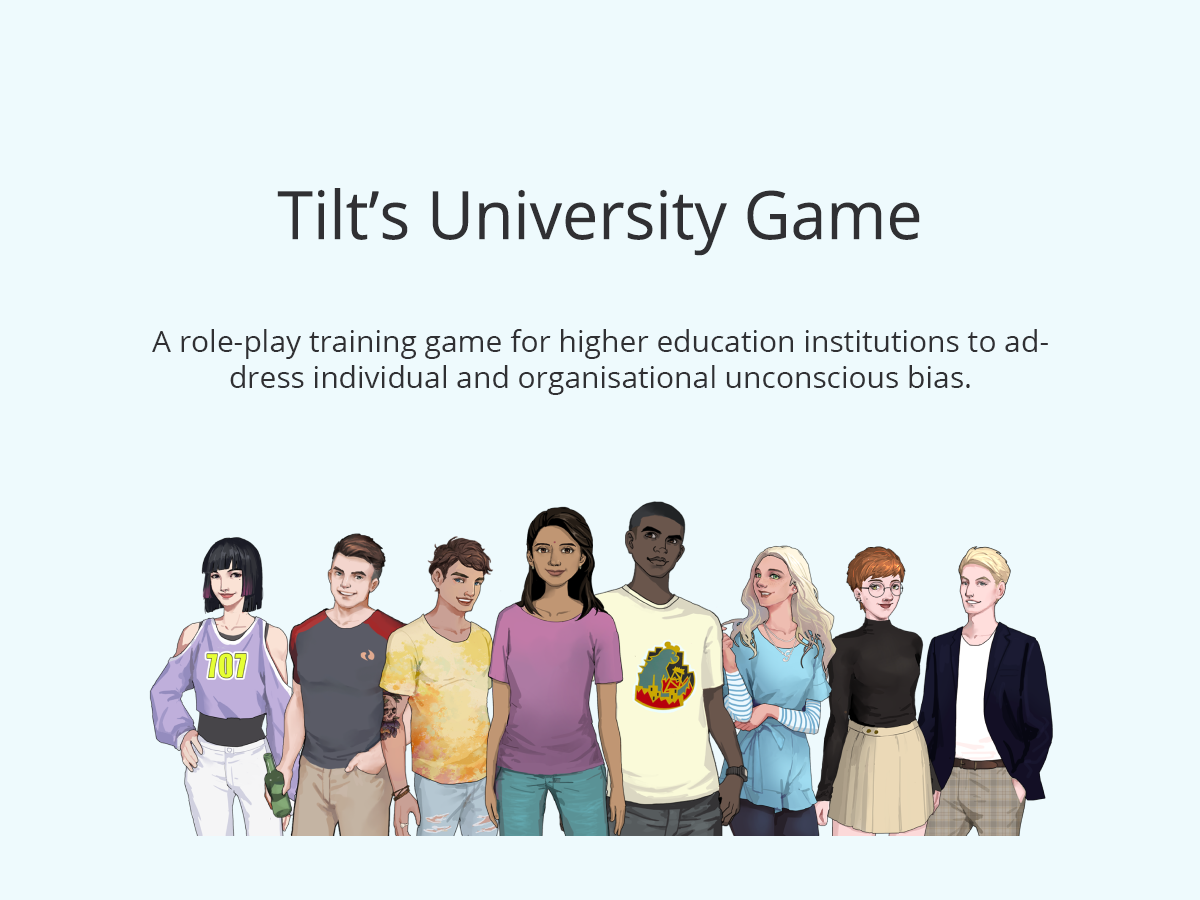
<style>
.page{position:relative;width:1200px;height:900px;background:#eefafd}
.page>*{position:absolute;margin:0}
.t1{font:67px "OpenSans";color:#303033;scale:0.96 1}
.t2{font:30px "OpenSans";color:#303033}
</style>
<div class="page">
<p class="t1" style="left:277px;top:188px;width:643px;height:68px">Tilt’s University Game</p>
<p class="t2" style="left:152px;top:329px;width:896px;height:66px;text-align:center">A role-play training game for higher education institutions to address individual and organisational unconscious bias.</p>
</div>
